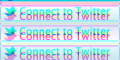
<style>
.page{position:relative;width:120px;height:60px}
.page>*{position:absolute;margin:0}
.t1{font:11px "MyriadPro-Regular";letter-spacing:0.025em}
</style>
<div class="page">
<p class="t1" style="left:19px;top:6px;width:91px;height:8px">Connect to Twitter</p>
<p class="t1" style="left:19px;top:26px;width:91px;height:8px">Connect to Twitter</p>
<p class="t1" style="left:19px;top:46px;width:91px;height:8px">Connect to Twitter</p>
</div>
